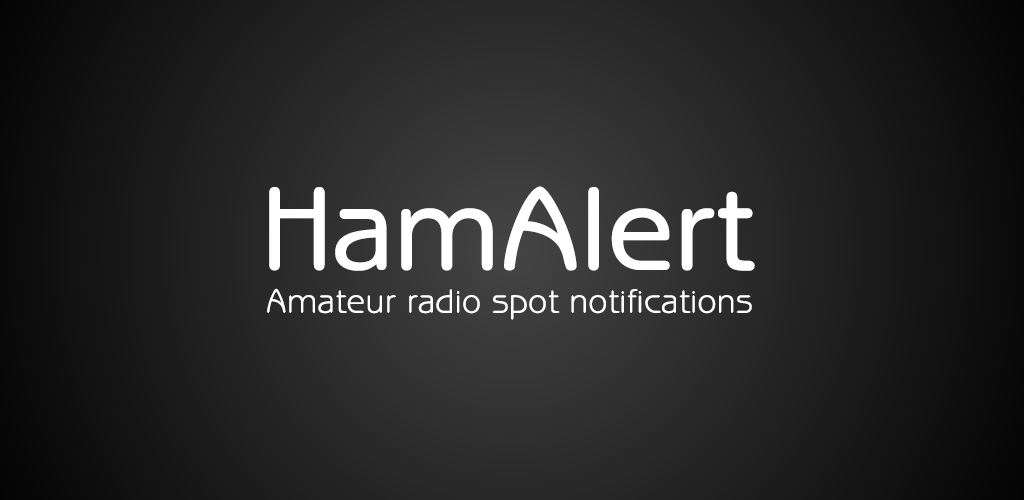
<style>
.page{position:relative;width:1024px;height:500px}
.page>*{position:absolute;margin:0}
.t1{font:120px "BenguiatGothic-Medium";color:#ffffff}
.t2{font:34.5px "BenguiatGothic-Book";color:#ffffff}
</style>
<div class="page">
<p class="t1" style="left:269px;top:186px;width:486px;height:85px">HamAlert</p>
<p class="t2" style="left:267px;top:288px;width:485px;height:32px">Amateur radio spot notifications</p>
</div>
